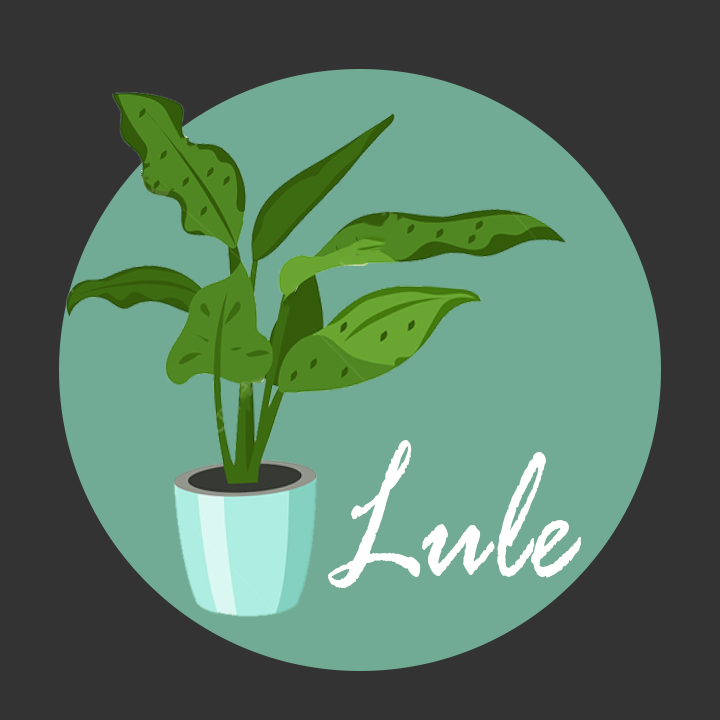
<style>
.page{position:relative;width:720px;height:720px;background:#333333}
.page>*{position:absolute;margin:0}
.t1{font:207.2px "RageItalic";color:#ffffff;scale:0.69 1}
</style>
<div class="page">
<p class="t1" style="left:327px;top:440px;width:254px;height:148px">Lule</p>
</div>
